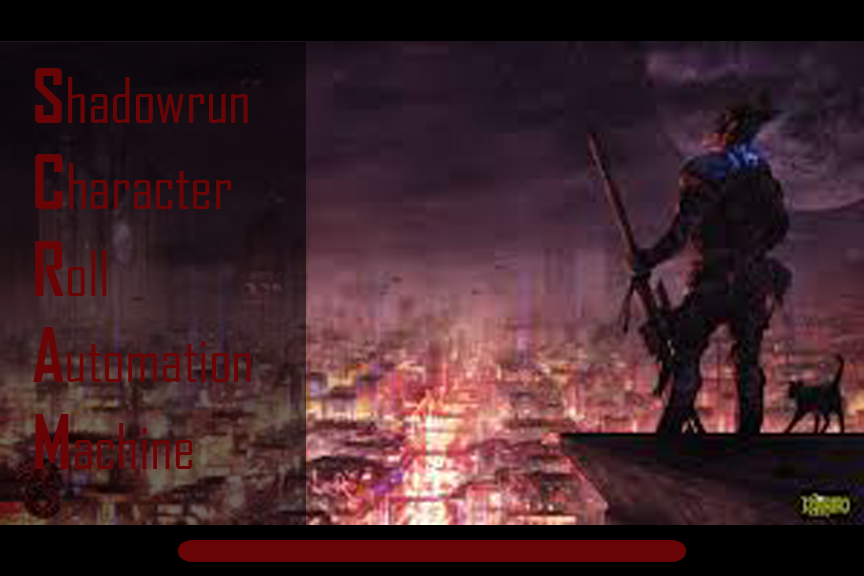
<style>
.page{position:relative;width:864px;height:576px}
.page>*{position:absolute;margin:0}
.t1{font:60px "AgencyFB-Reg";color:#690406}
.t2{font:72px "AgencyFB-Bold";color:#690406}
</style>
<div class="page">
<p class="t1" style="left:33px;top:68px;width:218px;height:401px"><span class="t2">S</span>hadowrun<br><span class="t2">C</span>haracter<br><span class="t2">R</span>oll<br><span class="t2">A</span>utomation<br><span class="t2">M</span>achine</p>
</div>
